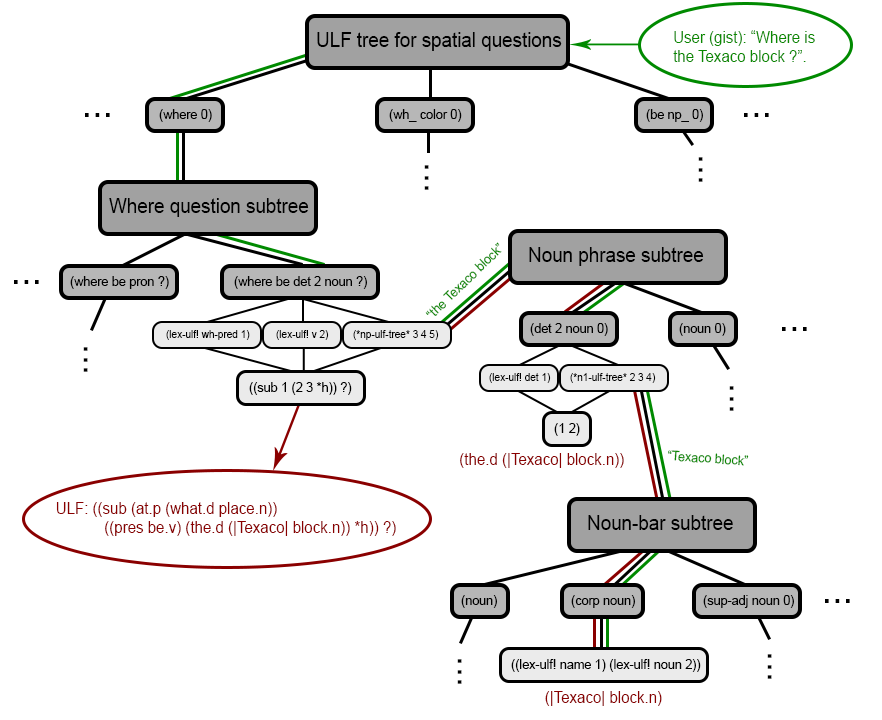
<style>
.page{position:relative;width:882px;height:720px;background:#ffffff}
.page>*{position:absolute;margin:0}
.t1{font:16px "ArialMT";color:#0a8a00;scale:0.94 1}
.t2{font:20px "ArialMT";color:#000000;scale:0.94 1}
.t3{font:40px "ArialMT";color:#000000;scale:0.94 1}
.t4{font:13.3px "ArialMT";color:#000000;scale:0.94 1}
.t5{font:13.3px "ArialMT";color:#0a8a00;scale:0.94 1}
.t6{font:10.7px "ArialMT";color:#000000;scale:0.94 1}
.t7{font:12px "ArialMT";color:#8a0000;scale:0.94 1}
.t8{font:16px "ArialMT";color:#8a0000;scale:0.94 1}
</style>
<div class="page">
<p class="t1" style="left:673px;top:30px;width:142px;height:32px">User (gist): “Where is the Texaco block ?”.</p>
<p class="t2" style="left:317px;top:32px;width:245px;height:19px">ULF tree for spatial questions</p>
<p class="t3" style="left:85px;top:113px;width:25px;height:4px;rotate:180deg">...</p>
<p class="t4" style="left:159px;top:109px;width:53px;height:13px">(where 0)</p>
<p class="t4" style="left:389px;top:109px;width:73px;height:13px">(wh_ color 0)</p>
<p class="t4" style="left:646px;top:109px;width:57px;height:13px">(be np_ 0)</p>
<p class="t3" style="left:744px;top:113px;width:25px;height:4px;rotate:180deg">...</p>
<p class="t3" style="left:698px;top:157px;width:5px;height:25px;rotate:90deg">...</p>
<p class="t3" style="left:424px;top:165px;width:5px;height:25px;rotate:90deg">...</p>
<p class="t2" style="left:109px;top:198px;width:200px;height:19px">Where question subtree</p>
<p class="t5" style="left:425px;top:242px;width:77px;height:74px;rotate:-44deg">“the Texaco block”</p>
<p class="t2" style="left:529px;top:247px;width:175px;height:19px">Noun phrase subtree</p>
<p class="t3" style="left:14px;top:280px;width:25px;height:4px;rotate:180deg">...</p>
<p class="t4" style="left:70px;top:276px;width:99px;height:13px">(where be pron ?)</p>
<p class="t4" style="left:234px;top:276px;width:133px;height:13px">(where be det 2 noun ?)</p>
<p class="t4" style="left:530px;top:323px;width:78px;height:13px">(det 2 noun 0)</p>
<p class="t4" style="left:679px;top:323px;width:47px;height:13px">(noun 0)</p>
<p class="t3" style="left:782px;top:327px;width:25px;height:4px;rotate:180deg">...</p>
<p class="t6" style="left:166px;top:330px;width:84px;height:10px">(lex-ulf! wh-pred 1)</p>
<p class="t6" style="left:276px;top:330px;width:53px;height:10px">(lex-ulf! v 2)</p>
<p class="t6" style="left:353px;top:330px;width:86px;height:10px">(*np-ulf-tree* 3 4 5)</p>
<p class="t3" style="left:83px;top:347px;width:5px;height:25px;rotate:90deg">...</p>
<p class="t6" style="left:489px;top:373px;width:62px;height:10px">(lex-ulf! det 1)</p>
<p class="t6" style="left:570px;top:373px;width:86px;height:10px">(*n1-ulf-tree* 2 3 4)</p>
<p class="t4" style="left:249px;top:382px;width:103px;height:13px">((sub 1 (2 3 *h)) ?)</p>
<p class="t3" style="left:729px;top:386px;width:5px;height:25px;rotate:90deg">...</p>
<p class="t4" style="left:554px;top:423px;width:26px;height:13px">(1 2)</p>
<p class="t7" style="left:460px;top:453px;width:164px;height:15px">(the.d (|Texaco| block.n))</p>
<p class="t5" style="left:668px;top:450px;width:81px;height:16px;rotate:4deg">“Texaco block”</p>
<p class="t8" style="left:56px;top:502px;width:340px;height:34px">ULF: ((sub (at.p (what.d place.n))<br>    ((pres be.v) (the.d (|Texaco| block.n)) *h)) ?)</p>
<p class="t2" style="left:588px;top:515px;width:145px;height:15px">Noun-bar subtree</p>
<p class="t4" style="left:461px;top:595px;width:36px;height:13px">(noun)</p>
<p class="t4" style="left:571px;top:595px;width:64px;height:13px">(corp noun)</p>
<p class="t4" style="left:703px;top:595px;width:91px;height:13px">(sup-adj noun 0)</p>
<p class="t3" style="left:825px;top:599px;width:25px;height:4px;rotate:180deg">...</p>
<p class="t3" style="left:767px;top:654px;width:5px;height:25px;rotate:90deg">...</p>
<p class="t3" style="left:457px;top:659px;width:5px;height:25px;rotate:90deg">...</p>
<p class="t4" style="left:511px;top:659px;width:190px;height:13px">((lex-ulf! name 1) (lex-ulf! noun 2))</p>
<p class="t8" style="left:545px;top:691px;width:117px;height:15px">(|Texaco| block.n)</p>
</div>
